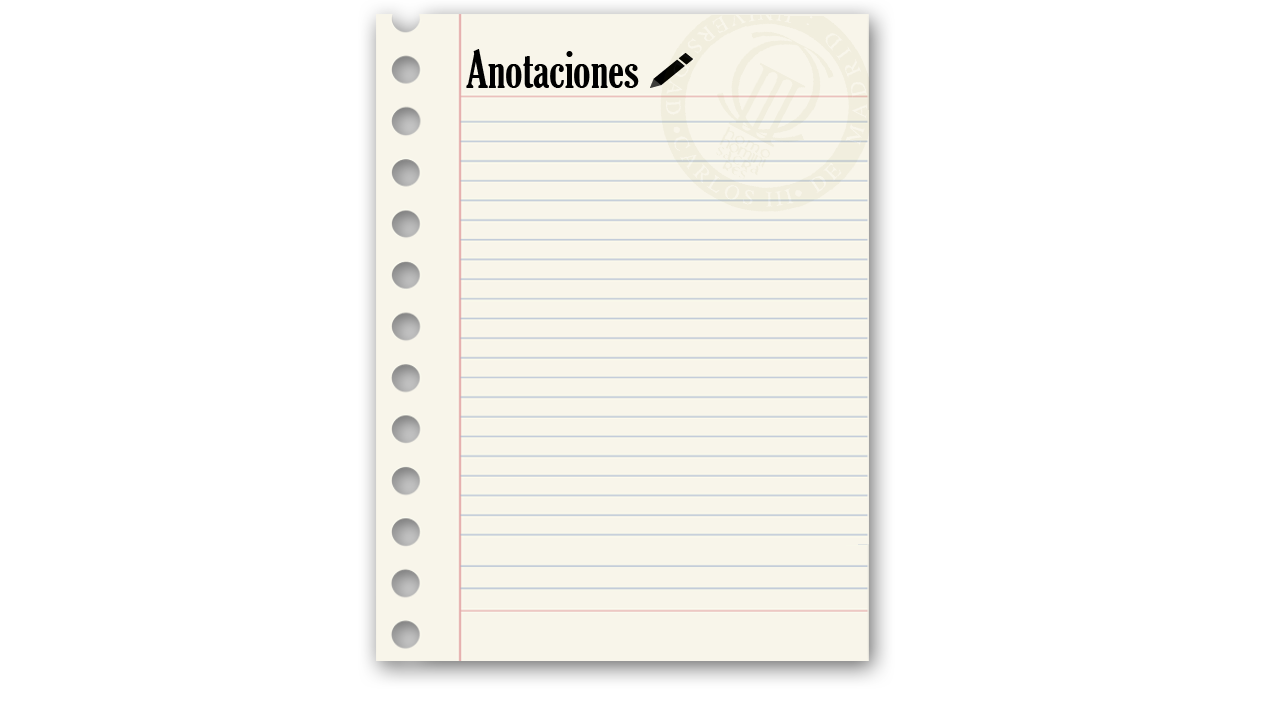
<style>
.page{position:relative;width:1280px;height:709px;background:#ffffff}
.page>*{position:absolute;margin:0}
.t1{font:50.7px "GloucesterMT-ExtraCondensed";color:#000000}
</style>
<div class="page">
<p class="t1" style="left:466px;top:49px;width:173px;height:39px">Anotaciones</p>
</div>
